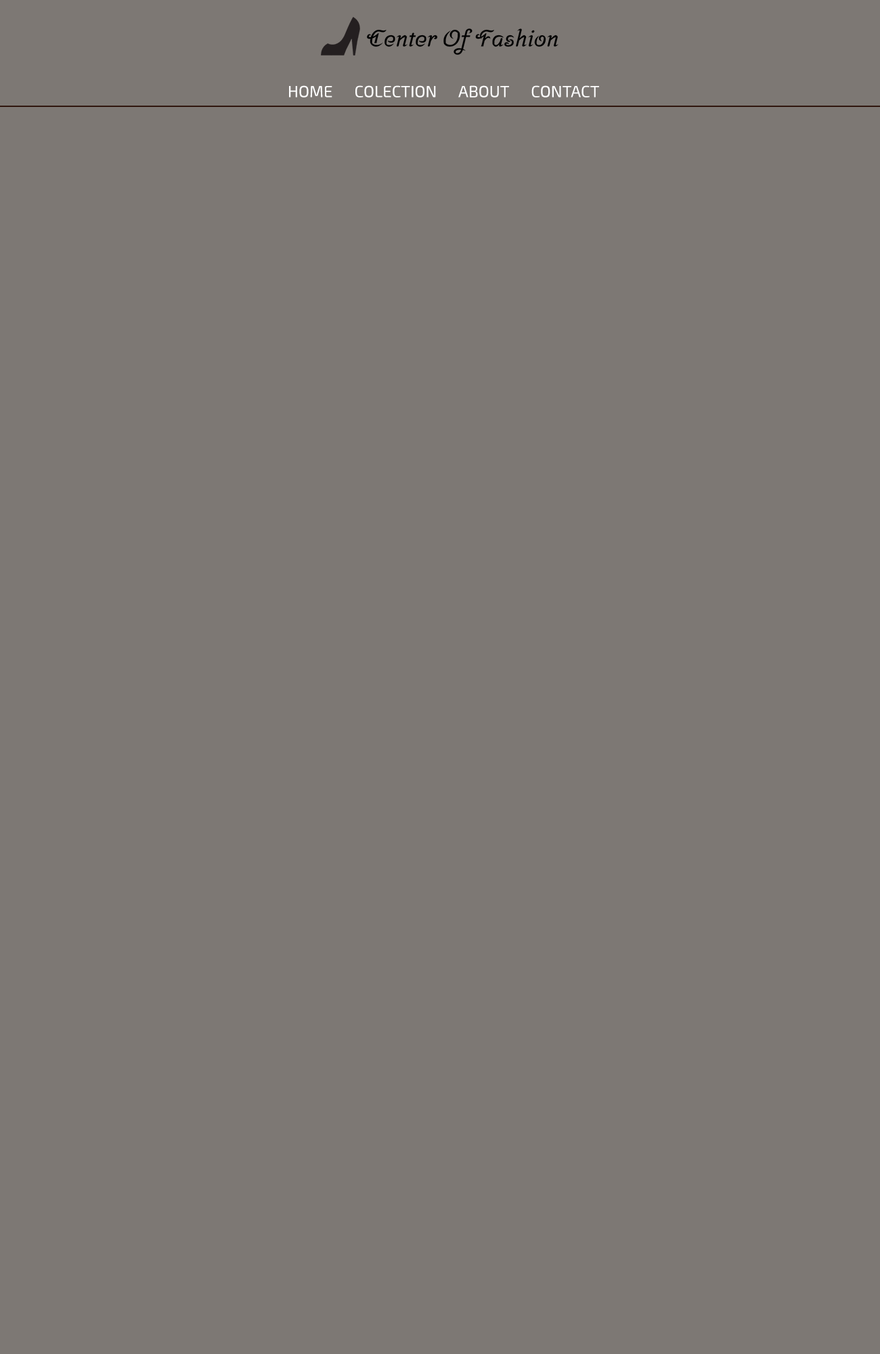
<style>
.page{position:relative;width:880px;height:1354px;background:#7d7874}
.page>*{position:absolute;margin:0}
.t1{font:16.3px "Exo2-Regular";color:#ffffff}
</style>
<div class="page">
<p class="t1" style="left:289px;top:85px;width:310px;height:13px">HOME      COLECTION      ABOUT      CONTACT</p>
</div>
